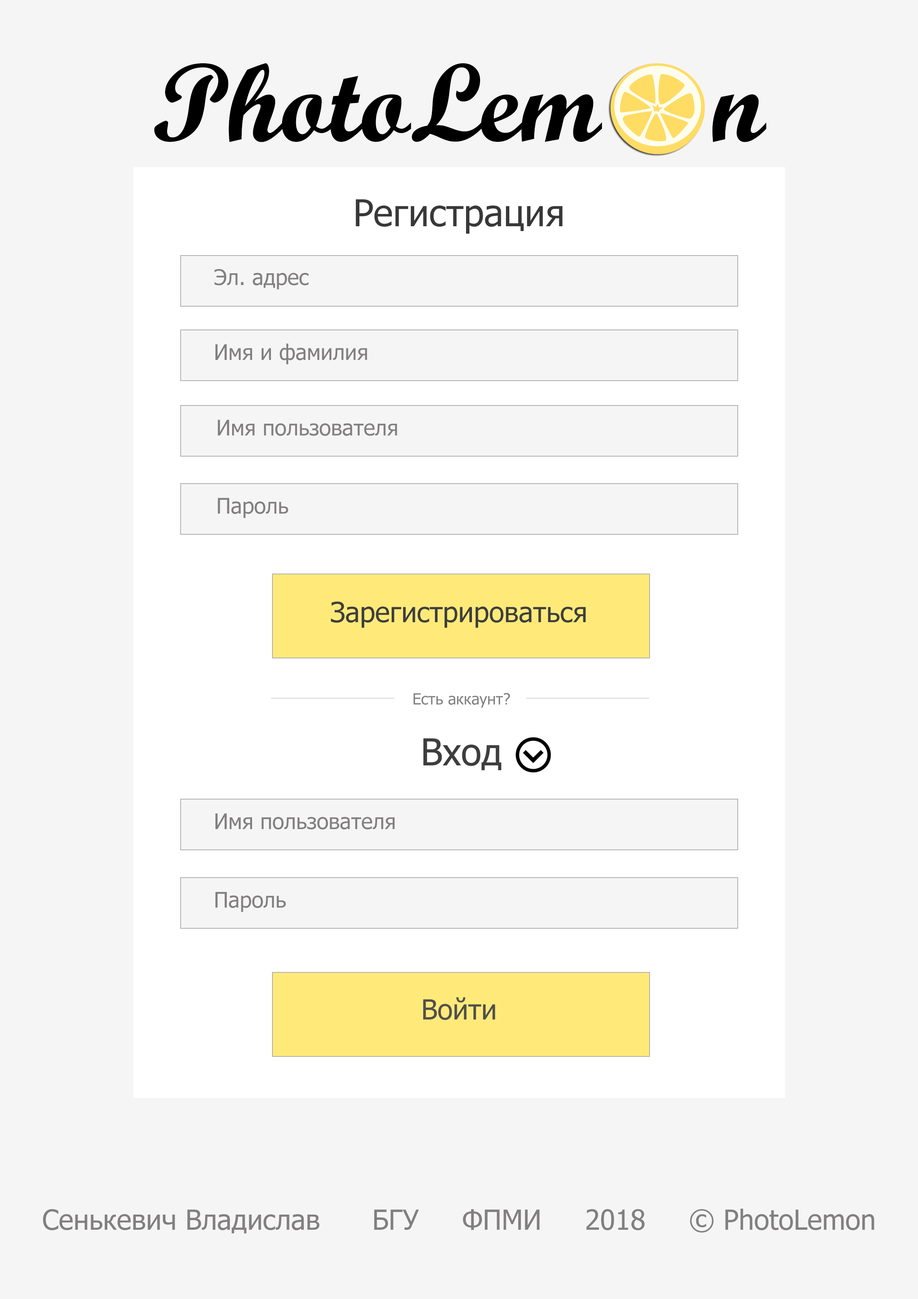
<style>
.page{position:relative;width:918px;height:1299px;background:#f6f5f5}
.page>*{position:absolute;margin:0}
.t1{font:111.1px "ScriptMTBold";color:#000000}
.t2{font:37px "Tahoma";color:#383838}
.t3{font:21.6px "Tahoma";color:#817f7f}
.t4{font:27.8px "Tahoma";color:#3e3e3e}
.t5{font:15.4px "Tahoma";color:#817f7f}
.t6{font:37px "Tahoma";color:#3e3e3e}
.t7{font:27.8px "Tahoma";color:#514f4f}
.t8{font:27.8px "Tahoma";color:#817f7f}
</style>
<div class="page">
<p class="t1" style="left:154px;top:63px;width:612px;height:79px">PhotoLem    n</p>
<p class="t2" style="left:356px;top:199px;width:207px;height:35px">Регистрация</p>
<p class="t3" style="left:214px;top:269px;width:95px;height:21px">Эл. адрес</p>
<p class="t3" style="left:215px;top:343px;width:152px;height:21px">Имя и фамилия</p>
<p class="t3" style="left:218px;top:419px;width:179px;height:17px">Имя пользователя</p>
<p class="t3" style="left:218px;top:498px;width:70px;height:20px">Пароль</p>
<p class="t4" style="left:331px;top:601px;width:255px;height:27px">Зарегистрироваться</p>
<p class="t5" style="left:414px;top:693px;width:96px;height:14px">Есть аккаунт?</p>
<p class="t6" style="left:423px;top:738px;width:79px;height:32px">Вход</p>
<p class="t3" style="left:215px;top:813px;width:180px;height:16px">Имя пользователя</p>
<p class="t3" style="left:215px;top:891px;width:71px;height:21px">Пароль</p>
<p class="t7" style="left:423px;top:997px;width:72px;height:23px">Войти</p>
<p class="t8" style="left:43px;top:1208px;width:831px;height:25px">Сенькевич Владислав      БГУ     ФПМИ     2018     © PhotoLemon</p>
</div>
